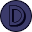
<style>
.page{position:relative;width:32px;height:32px;background:#3c3b6b}
.page>*{position:absolute;margin:0}
.t1{font:27.4px "Fundamental3DBrigade";letter-spacing:-0.05em;color:#05031a}
</style>
<div class="page">
<p class="t1" style="left:9px;top:5px;width:17px;height:22px">D</p>
</div>
